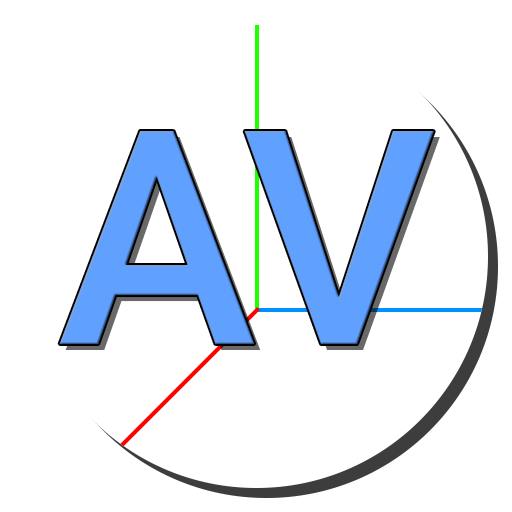
<style>
.page{position:relative;width:512px;height:512px;background:#ffffff}
.page>*{position:absolute;margin:0}
.t1{font:300px "Roboto-Medium";color:#60a0ff}
</style>
<div class="page">
<p class="t1" style="left:59px;top:131px;width:375px;height:213px">AV</p>
</div>
